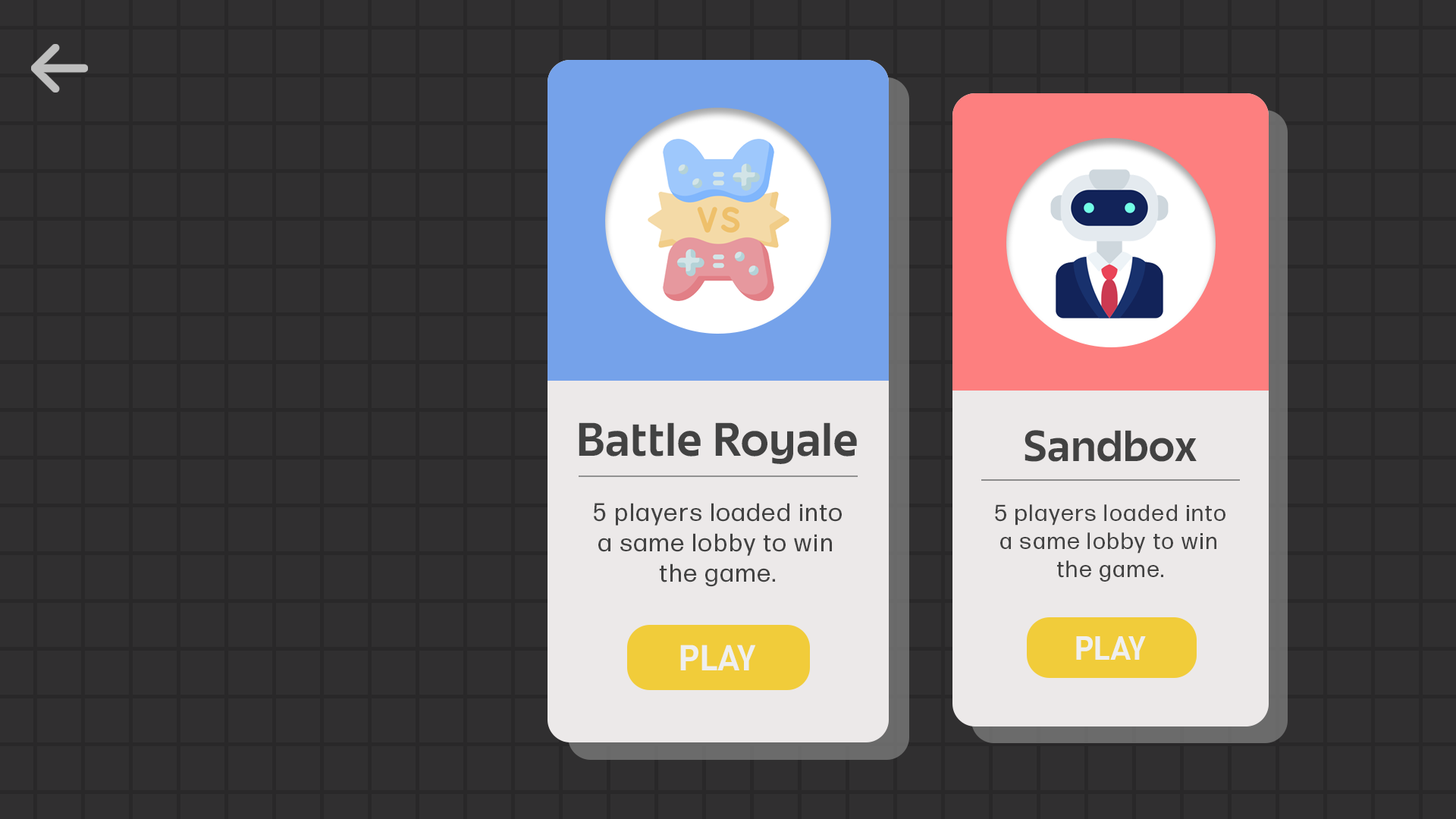
<style>
.page{position:relative;width:1456px;height:819px;background:#302f30}
.page>*{position:absolute;margin:0}
.t1{font:41.1px "JuneExptVariable-Active";letter-spacing:0.01em;color:#424242}
.t2{font:38.1px "JuneExptVariable-Active";letter-spacing:0.01em;color:#424242}
.t3{font:25.3px "FormaDJRBanner-Regular";letter-spacing:0.1em;color:#424242}
.t4{font:23.4px "FormaDJRBanner-Regular";letter-spacing:0.1em;color:#424242}
.t5{font:29.3px "JuneExptVariable-Active";color:#efefef}
.t6{font:31.6px "JuneExptVariable-Active";color:#efefef}
</style>
<div class="page">
<p class="t1" style="left:579px;top:422px;width:278px;height:42px">Battle Royale</p>
<p class="t2" style="left:1024px;top:430px;width:173px;height:32px">Sandbox</p>
<p class="t3" style="left:594px;top:503px;width:248px;height:84px;text-align:center">5 players loaded into<br>a same lobby to win <br>the game.</p>
<p class="t4" style="left:995px;top:504px;width:230px;height:78px;text-align:center">5 players loaded into<br>a same lobby to win <br>the game.</p>
<p class="t5" style="left:1076px;top:636px;width:70px;height:24px">PLAY</p>
<p class="t6" style="left:680px;top:645px;width:76px;height:25px">PLAY</p>
</div>
